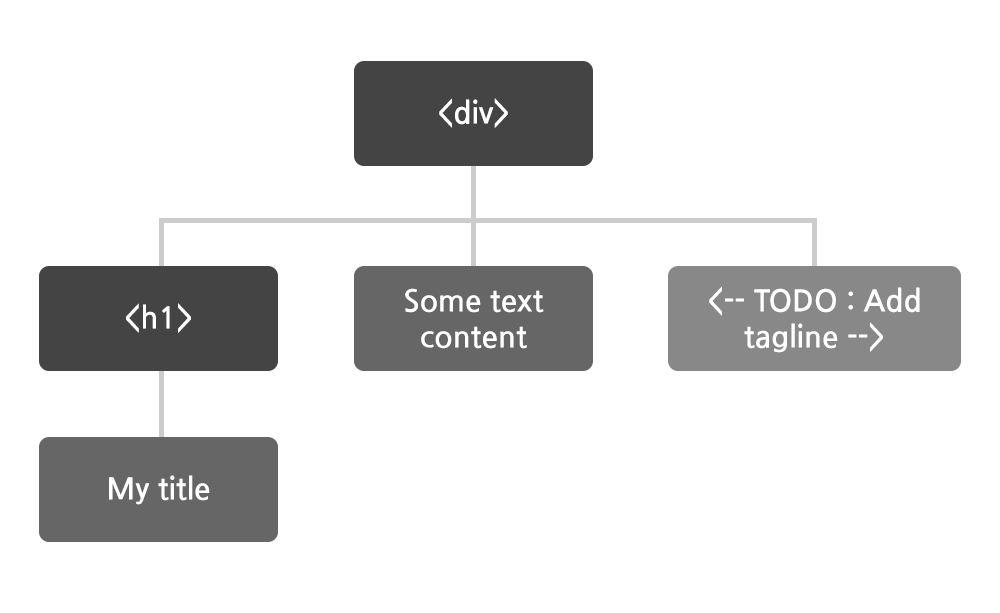
<style>
.page{position:relative;width:1000px;height:613px;background:#ffffff}
.page>*{position:absolute;margin:0}
.t1{font:30px "NanumGothicBold";color:#ffffff}
</style>
<div class="page">
<p class="t1" style="left:439px;top:98px;width:69px;height:30px">&lt;div&gt;</p>
<p class="t1" style="left:405px;top:288px;width:139px;height:61px;text-align:center">Some text<br>content</p>
<p class="t1" style="left:709px;top:286px;width:211px;height:67px;text-align:center">&lt;-- TODO : Add<br>tagline --&gt;</p>
<p class="t1" style="left:126px;top:303px;width:65px;height:30px">&lt;h1&gt;</p>
<p class="t1" style="left:109px;top:475px;width:101px;height:30px">My title</p>
</div>
